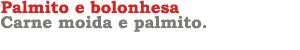
<style>
.page{position:relative;width:300px;height:50px;background:#ffffff}
.page>*{position:absolute;margin:0}
.t1{font:17px "BookmanOldStyle-Bold";color:#d42525}
.t2{font:17px "BookmanOldStyle-Bold";color:#7c7c79}
</style>
<div class="page">
<p class="t1" style="left:1px;top:0px;width:178px;height:14px">Palmito e bolonhesa</p>
<p class="t2" style="left:1px;top:15px;width:206px;height:17px">Carne moida e palmito.</p>
</div>
